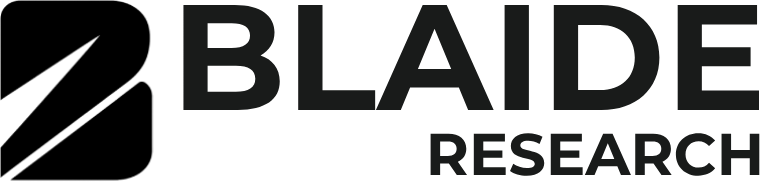
<style>
.page{position:relative;width:760px;height:182px;background:#ffffff}
.page>*{position:absolute;margin:0}
.t1{font:150px "Montserrat-Bold";color:#191b1a}
.t2{font:58.8px "Montserrat-Bold";color:#191b1a}
</style>
<div class="page">
<p class="t1" style="left:183px;top:5px;width:576px;height:105px">BLAIDE</p>
<p class="t2" style="left:430px;top:133px;width:330px;height:43px">RESEARCH</p>
</div>
